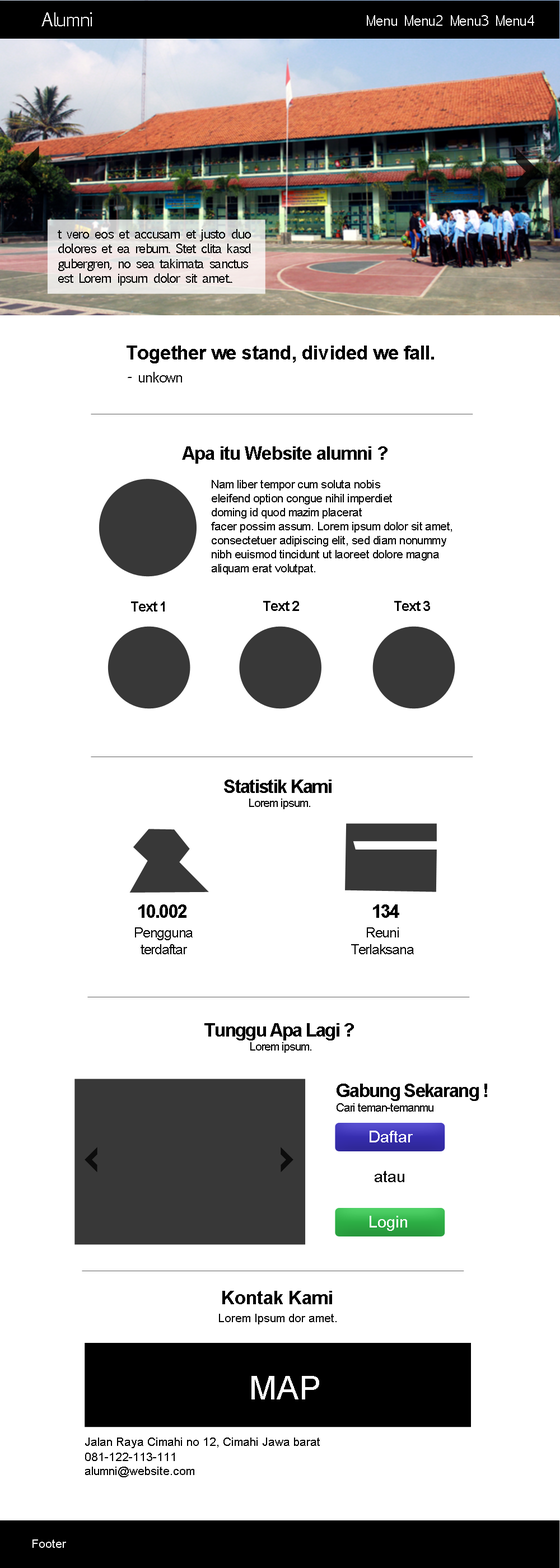
<style>
.page{position:relative;width:560px;height:1568px;background:#ffffff}
.page>*{position:absolute;margin:0}
.t1{font:18.7px "EuphemiaCAS";letter-spacing:-0.05em;color:#ffffff}
.t2{font:14px "EuphemiaCAS";letter-spacing:-0.05em;color:#ffffff}
.t3{font:12.3px "EuphemiaCAS";letter-spacing:-0.05em;color:#000000}
.t4{font:19.9px "Arial-BoldMT";letter-spacing:-0.025em;color:#000000}
.t5{font:14px "EuphemiaCAS";letter-spacing:-0.05em;color:#000000}
.t6{font:18.7px "Arial-BoldMT";letter-spacing:-0.025em;color:#000000}
.t7{font:11.7px "ArialMT";letter-spacing:-0.025em;color:#000000}
.t8{font:14px "Arial-BoldMT";letter-spacing:-0.05em;color:#000000}
.t9{font:18.7px "Arial-BoldMT";letter-spacing:-0.05em;color:#000000}
.t10{font:11.7px "ArialMT";letter-spacing:-0.05em;color:#000000}
.t11{font:14px "ArialMT";letter-spacing:-0.05em;color:#000000}
.t12{font:16.3px "ArialMT";color:#ffffff}
.t13{font:16.3px "ArialMT";color:#000000}
.t14{font:18.7px "Arial-BoldMT";color:#000000}
.t15{font:11.7px "ArialMT";color:#000000}
.t16{font:32.7px "ArialMT";color:#ffffff}
.t17{font:11.7px "ArialMT";color:#ffffff}
</style>
<div class="page">
<p class="t1" style="left:41px;top:12px;width:51px;height:14px">Alumni</p>
<p class="t2" style="left:367px;top:15px;width:167px;height:11px">Menu Menu2 Menu3 Menu4</p>
<p class="t3" style="left:58px;top:229px;width:193px;height:57px">t vero eos et accusam et justo duo <br>dolores et ea rebum. Stet clita kasd <br>gubergren, no sea takimata sanctus <br>est Lorem ipsum dolor sit amet..</p>
<p class="t4" style="left:127px;top:346px;width:307px;height:17px">Together we stand, divided we fall.</p>
<p class="t5" style="left:128px;top:372px;width:54px;height:10px">- unkown</p>
<p class="t6" style="left:182px;top:446px;width:206px;height:18px">Apa itu Website alumni ?</p>
<p class="t7" style="left:211px;top:480px;width:241px;height:95px">Nam liber tempor cum soluta nobis <br>eleifend option congue nihil imperdiet <br>doming id quod mazim placerat <br>facer possim assum. Lorem ipsum dolor sit amet,<br>consectetuer adipiscing elit, sed diam nonummy<br>nibh euismod tincidunt ut laoreet dolore magna <br>aliquam erat volutpat.</p>
<p class="t8" style="left:131px;top:601px;width:34px;height:11px">Text 1</p>
<p class="t8" style="left:263px;top:601px;width:36px;height:10px">Text 2</p>
<p class="t8" style="left:394px;top:601px;width:36px;height:10px">Text 3</p>
<p class="t9" style="left:224px;top:780px;width:108px;height:13px">Statistik Kami</p>
<p class="t10" style="left:249px;top:799px;width:61px;height:10px">Lorem ipsum.</p>
<p class="t9" style="left:138px;top:904px;width:48px;height:14px">10.002</p>
<p class="t9" style="left:373px;top:904px;width:26px;height:14px">134</p>
<p class="t11" style="left:135px;top:927px;width:58px;height:27px;text-align:center">Pengguna<br>terdaftar</p>
<p class="t11" style="left:351px;top:927px;width:63px;height:27px;text-align:center">Reuni<br>Terlaksana</p>
<p class="t9" style="left:204px;top:1023px;width:150px;height:17px">Tunggu Apa Lagi ?</p>
<p class="t10" style="left:250px;top:1042px;width:61px;height:11px">Lorem ipsum.</p>
<p class="t9" style="left:337px;top:1084px;width:150px;height:17px">Gabung Sekarang !</p>
<p class="t10" style="left:337px;top:1103px;width:96px;height:9px">Cari teman-temanmu</p>
<p class="t12" style="left:370px;top:1131px;width:43px;height:11px">Daftar</p>
<p class="t13" style="left:375px;top:1171px;width:29px;height:11px">atau</p>
<p class="t12" style="left:370px;top:1216px;width:37px;height:15px">Login</p>
<p class="t14" style="left:222px;top:1291px;width:110px;height:13px">Kontak Kami</p>
<p class="t15" style="left:219px;top:1314px;width:118px;height:10px">Lorem Ipsum dor amet.</p>
<p class="t16" style="left:251px;top:1376px;width:68px;height:23px">MAP</p>
<p class="t15" style="left:85px;top:1438px;width:235px;height:10px">Jalan Raya Cimahi no 12, Cimahi Jawa barat</p>
<p class="t15" style="left:85px;top:1453px;width:109px;height:24px">081-122-113-111<br>alumni@website.com</p>
<p class="t17" style="left:32px;top:1539px;width:34px;height:9px">Footer</p>
</div>
